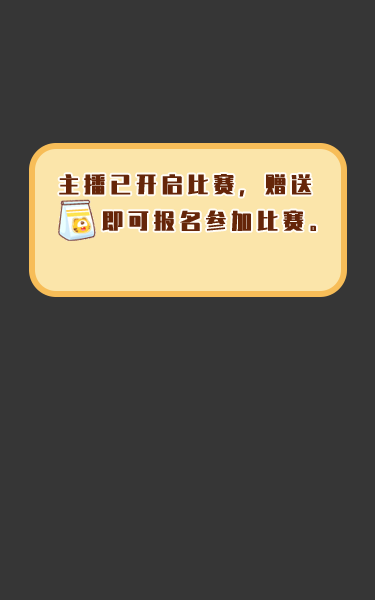
<style>
.page{position:relative;width:375px;height:600px;background:#363636}
.page>*{position:absolute;margin:0}
.t1{font:20.8px "ZhenyanGB-Regular";letter-spacing:0.24em;color:#652509}
</style>
<div class="page">
<p class="t1" style="left:59px;top:174px;width:257px;height:57px;text-align:center">主播已开启比赛，赠送<br>    即可报名参加比赛。</p>
</div>
